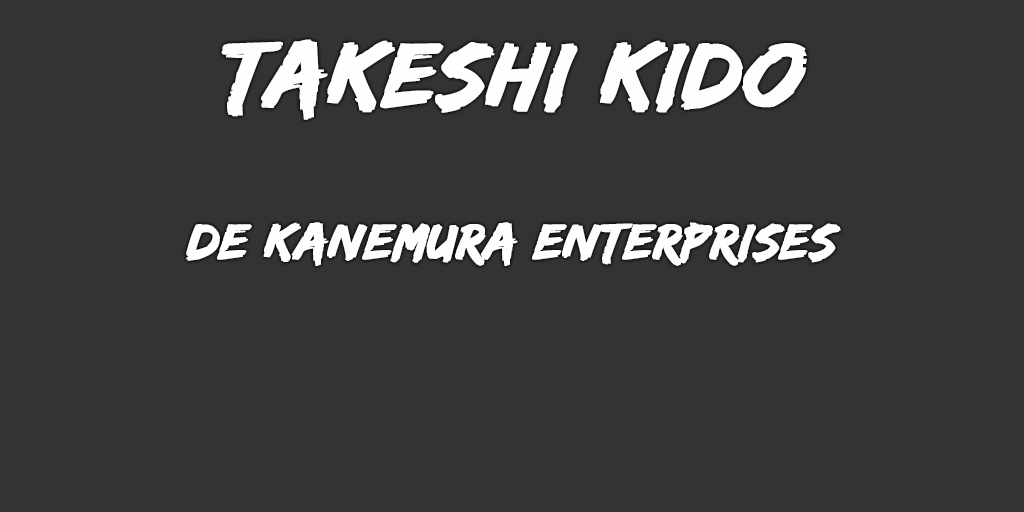
<style>
.page{position:relative;width:1024px;height:512px;background:#333333}
.page>*{position:absolute;margin:0}
.t1{font:95px "EdoSZ";color:#fefefe;font-weight:bold;font-style:italic;scale:1.04 1}
.t2{font:52px "EdoSZ";color:#fefefe;font-weight:bold;font-style:italic;scale:1.04 1}
</style>
<div class="page">
<p class="t1" style="left:221px;top:39px;width:586px;height:81px">takeshi kido</p>
<p class="t2" style="left:186px;top:222px;width:655px;height:44px">de Kanemura Enterprises</p>
</div>
